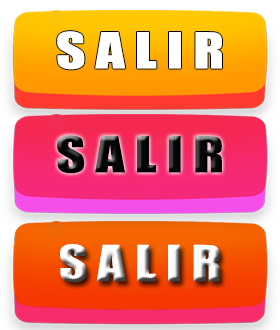
<style>
.page{position:relative;width:280px;height:330px}
.page>*{position:absolute;margin:0}
.t1{font:45.8px "Impact";color:#ffffff;scale:1.25 1}
.t2{font:45.8px "Impact";color:#060606;scale:1.25 1}
.t3{font:45.8px "Impact";scale:1.21 1}
</style>
<div class="page">
<p class="t1" style="left:57px;top:31px;width:165px;height:39px">S A L I R</p>
<p class="t2" style="left:57px;top:135px;width:165px;height:39px">S A L I R</p>
<p class="t3" style="left:60px;top:244px;width:160px;height:38px">S A L I R</p>
</div>
